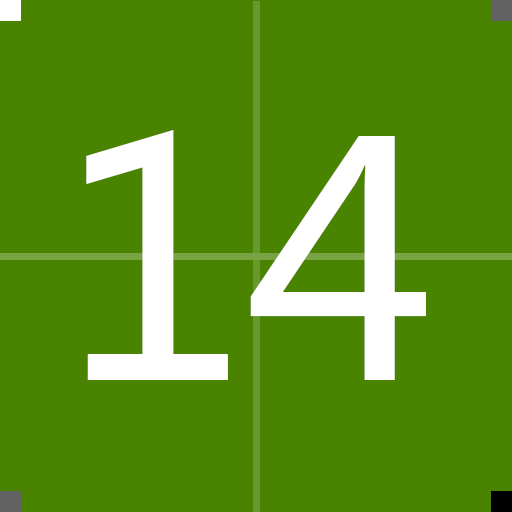
<style>
.page{position:relative;width:512px;height:512px;background:#498300}
.page>*{position:absolute;margin:0}
.t1{font:323.1px "MicrosoftYaHei";color:#ffffff}
</style>
<div class="page">
<p class="t1" style="left:86px;top:130px;width:340px;height:250px">14</p>
</div>
